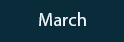
<style>
.page{position:relative;width:124px;height:42px;background:#0a2b39}
.page>*{position:absolute;margin:0}
.t1{font:18.5px "MyriadPro-Regular";color:#f0f9ff}
</style>
<div class="page">
<p class="t1" style="left:39px;top:12px;width:47px;height:14px">March</p>
</div>
